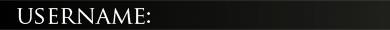
<style>
.page{position:relative;width:390px;height:30px}
.page>*{position:absolute;margin:0}
.t1{font:24px "TrajanPro-Regular";color:#ffffff}
</style>
<div class="page">
<p class="t1" style="left:17px;top:8px;width:133px;height:16px">username:</p>
</div>
